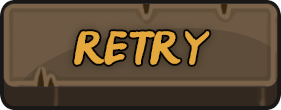
<style>
.page{position:relative;width:281px;height:110px}
.page>*{position:absolute;margin:0}
.t1{font:48.6px "SangSangFlowerRoad";letter-spacing:-0.025em;color:#e5a83d;text-transform:uppercase;font-weight:bold;font-style:italic}
</style>
<div class="page">
<p class="t1" style="left:74px;top:31px;width:136px;height:34px">RETRY</p>
</div>
